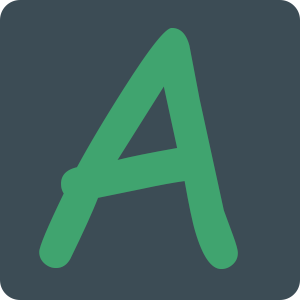
<style>
.page{position:relative;width:300px;height:300px;background:#3c4c55}
.page>*{position:absolute;margin:0}
.t1{font:326.6px "ComicSansMS";color:#40a46f}
</style>
<div class="page">
<p class="t1" style="left:39px;top:28px;width:199px;height:241px">A</p>
</div>
